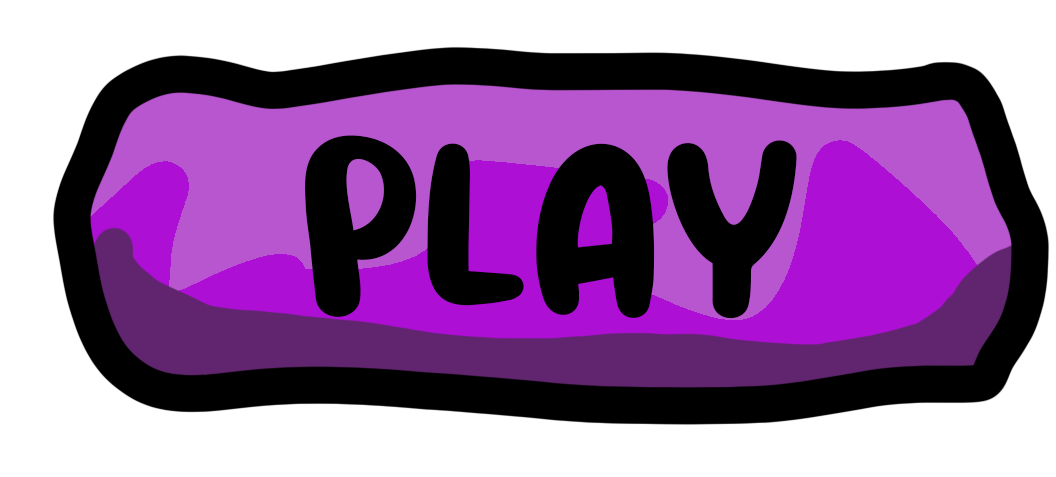
<style>
.page{position:relative;width:1056px;height:477px;background:#ffffff}
.page>*{position:absolute;margin:0}
.t1{font:200px "Pineapple-Days";color:#000000}
</style>
<div class="page">
<p class="t1" style="left:305px;top:135px;width:492px;height:184px">PLAY</p>
</div>
